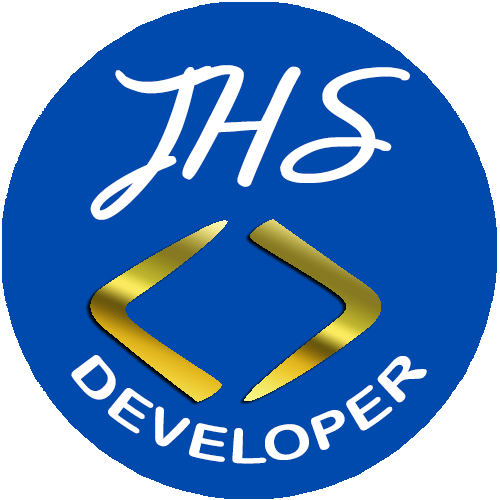
<style>
.page{position:relative;width:500px;height:500px;background:#004aad}
.page>*{position:absolute;margin:0}
.t1{font:160px "Alone-in-the-Dark";color:#ffffff}
.t2{font:48px "ArialRoundedMTBold";color:#ffffff}
</style>
<div class="page">
<p class="t1" style="left:90px;top:65px;width:320px;height:155px">JHS</p>
<p class="t2" style="left:71px;top:355px;width:356px;height:109px;text-align:center">DEVELOPER</p>
</div>
